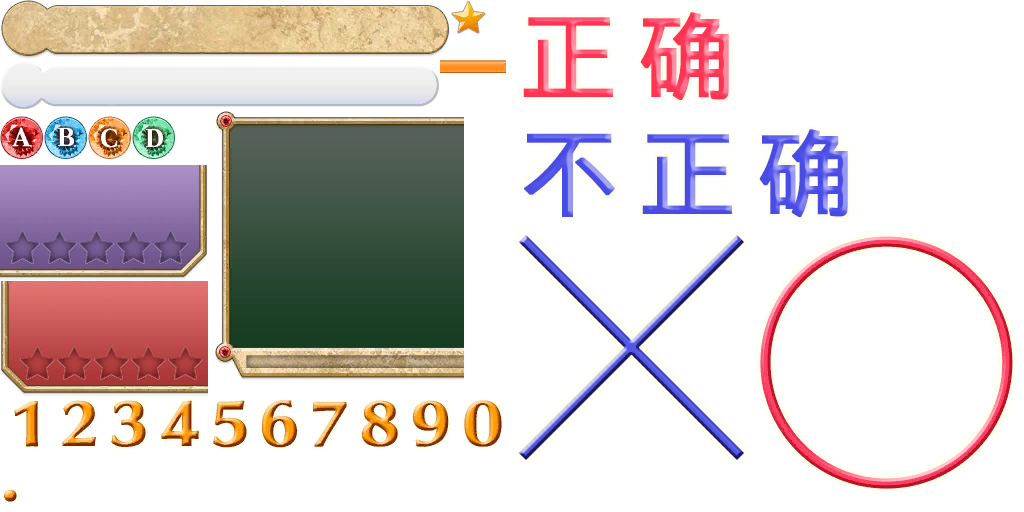
<style>
.page{position:relative;width:1024px;height:512px;background:#ffffff}
.page>*{position:absolute;margin:0}
.t1{font:96px "WenQuanYiMicroHeiMono";letter-spacing:0.2em;color:#ff3f63;font-weight:bold}
.t2{font:96px "WenQuanYiMicroHeiMono";letter-spacing:0.2em;color:#5456e9;font-weight:bold}
</style>
<div class="page">
<p class="t1" style="left:523px;top:12px;width:206px;height:88px">正确</p>
<p class="t2" style="left:524px;top:129px;width:324px;height:88px">不正确</p>
</div>
